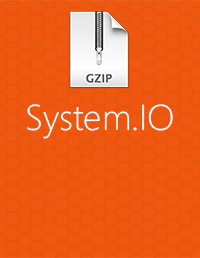
<style>
.page{position:relative;width:200px;height:258px;background:#f05810}
.page>*{position:absolute;margin:0}
.t1{font:36px "SegoeUI-Light";color:#fefefe}
</style>
<div class="page">
<p class="t1" style="left:27px;top:104px;width:146px;height:35px">System.IO</p>
</div>
